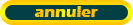
<style>
.page{position:relative;width:133px;height:25px;background:#004044}
.page>*{position:absolute;margin:0}
.t1{font:16px "ErasITC-Bold";color:#ffc600}
</style>
<div class="page">
<p class="t1" style="left:34px;top:6px;width:64px;height:11px">annuler</p>
</div>
